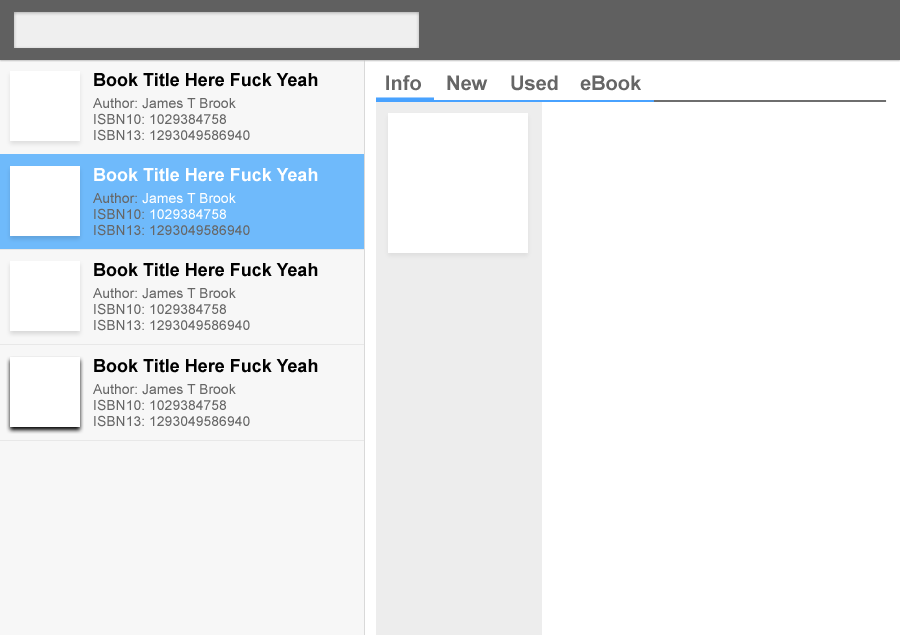
<style>
.page{position:relative;width:900px;height:635px;background:#ffffff}
.page>*{position:absolute;margin:0}
.t1{font:14px/16px "ArialMT";color:#666666}
.t2{font:18px "Arial-BoldMT";color:#000000}
.t3{font:14px/22px "ArialMT";color:#666666}
.t4{font:20px "Arial-BoldMT";color:#666666}
.t5{font:18px "Arial-BoldMT";color:#ffffff}
.t6{font:14px/22px "ArialMT";color:#ffffff}
.t7{font:14px/16px "ArialMT";color:#feffff}
</style>
<div class="page">
<p class="t1" style="left:93px;top:73px;width:225px;height:68px"><span class="t2">Book Title Here Fuck Yeah<br></span><span class="t3">Author: James T Brook<br></span>ISBN10: 1029384758<br>ISBN13: 1293049586940</p>
<p class="t4" style="left:386px;top:75px;width:35px;height:16px">Info</p>
<p class="t4" style="left:447px;top:75px;width:41px;height:16px">New</p>
<p class="t4" style="left:511px;top:75px;width:47px;height:16px">Used</p>
<p class="t4" style="left:580px;top:75px;width:61px;height:16px">eBook</p>
<p class="t5" style="left:93px;top:168px;width:225px;height:68px">Book Title Here Fuck Yeah<br><span class="t3">Author: </span><span class="t6">James T Brook<br></span><span class="t1">ISBN10: </span><span class="t7">1029384758<br></span><span class="t1">ISBN13: 1293049586940</span></p>
<p class="t1" style="left:93px;top:263px;width:225px;height:68px"><span class="t2">Book Title Here Fuck Yeah<br></span><span class="t3">Author: James T Brook<br></span>ISBN10: 1029384758<br>ISBN13: 1293049586940</p>
<p class="t1" style="left:93px;top:359px;width:225px;height:68px"><span class="t2">Book Title Here Fuck Yeah<br></span><span class="t3">Author: James T Brook<br></span>ISBN10: 1029384758<br>ISBN13: 1293049586940</p>
</div>
